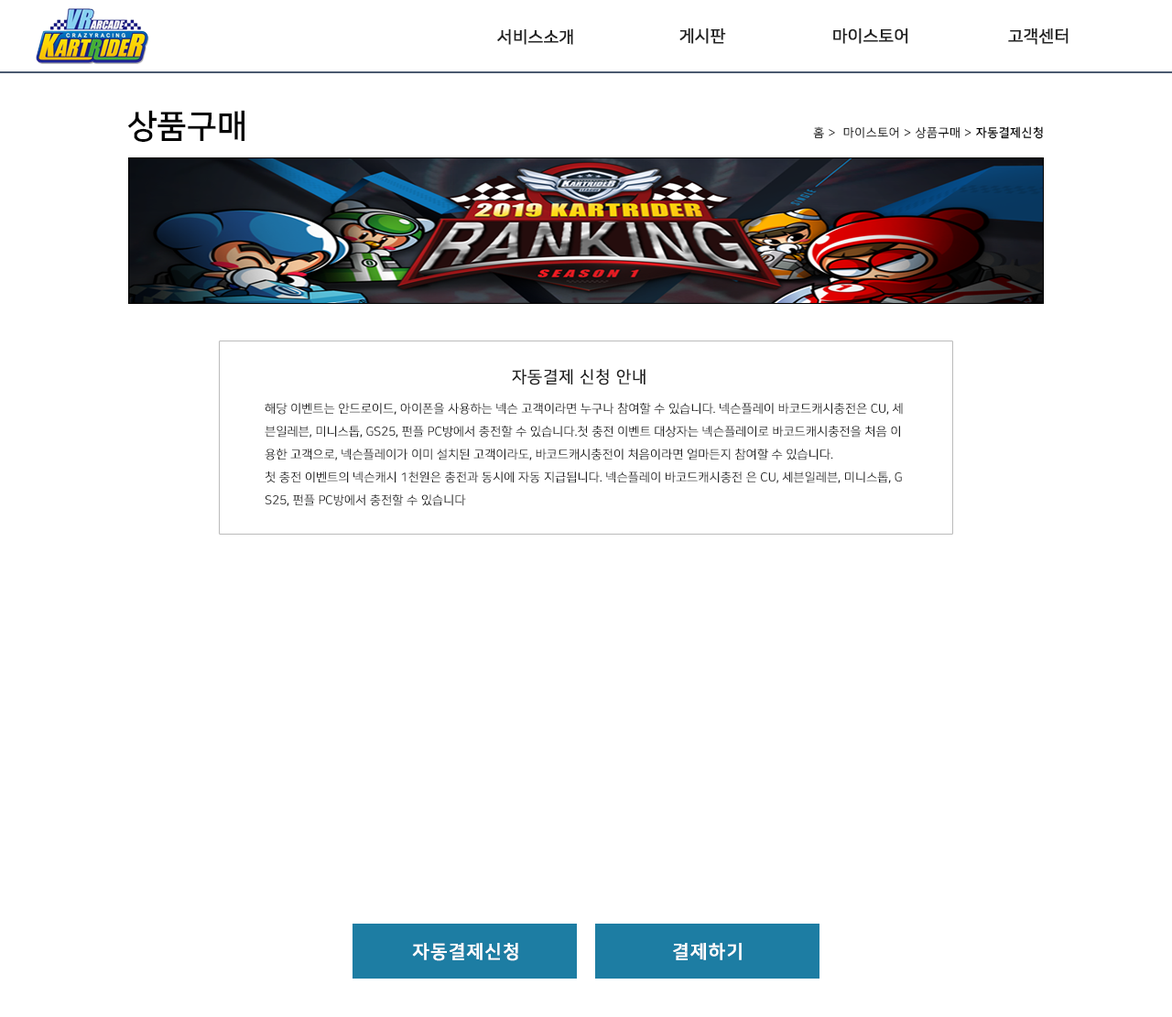
<style>
.page{position:relative;width:1172px;height:1017px;background:#ffffff}
.page>*{position:absolute;margin:0}
.t1{font:16.5px "NanumSquareR";color:#222222;font-weight:bold}
.t2{font:33px "NanumSquareB";color:#000000}
.t3{font:11.9px "NanumSquareR";letter-spacing:0.05em;color:#000000}
.t4{font:11.9px "NanumSquareL";letter-spacing:0.05em;color:#000000}
.t5{font:11.9px "NanumSquareB";letter-spacing:0.05em;color:#000000}
.t6{font:16.5px "NanumSquareR";letter-spacing:0.04em;color:#222222;text-transform:uppercase;font-weight:bold}
.t7{font:11.9px/22.9px "NanumSquareL";color:#222222;text-transform:uppercase;font-weight:bold}
.t8{font:18.3px "NanumSquareB";letter-spacing:0.05em;color:#ffffff;font-weight:bold}
</style>
<div class="page">
<p class="t1" style="left:497px;top:28px;width:76px;height:17px">서비스소개</p>
<p class="t1" style="left:679px;top:27px;width:47px;height:17px">게시판</p>
<p class="t1" style="left:833px;top:27px;width:75px;height:17px">마이스토어</p>
<p class="t1" style="left:1008px;top:27px;width:61px;height:17px">고객센터</p>
<p class="t2" style="left:127px;top:110px;width:117px;height:32px">상품구매</p>
<p class="t3" style="left:813px;top:126px;width:230px;height:13px">홈 <span class="t4">&gt; </span> 마이스토어 &gt; 상품구매 &gt; <span class="t5">자동결제신청</span></p>
<p class="t6" style="left:512px;top:369px;width:134px;height:17px">자동결제 신청 안내</p>
<p class="t7" style="left:265px;top:403px;width:638px;height:103px">해당 이벤트는 안드로이드, 아이폰을 사용하는 넥슨 고객이라면 누구나 참여할 수 있습니다. 넥슨플레이 바코드캐시충전은 CU, 세<br>븐일레븐, 미니스톱, GS25, 펀플 PC방에서 충전할 수 있습니다.첫 충전 이벤트 대상자는 넥슨플레이로 바코드캐시충전을 처음 이<br>용한 고객으로, 넥슨플레이가 이미 설치된 고객이라도, 바코드캐시충전이 처음이라면 얼마든지 참여할 수 있습니다.<br>첫 충전 이벤트의 넥슨캐시 1천원은 충전과 동시에 자동 지급됩니다. 넥슨플레이 바코드캐시충전 은 CU, 세븐일레븐, 미니스톱, G<br>S25, 펀플 PC방에서 충전할 수 있습니다</p>
<p class="t8" style="left:412px;top:943px;width:106px;height:18px">자동결제신청</p>
<p class="t8" style="left:673px;top:943px;width:69px;height:18px">결제하기</p>
</div>
